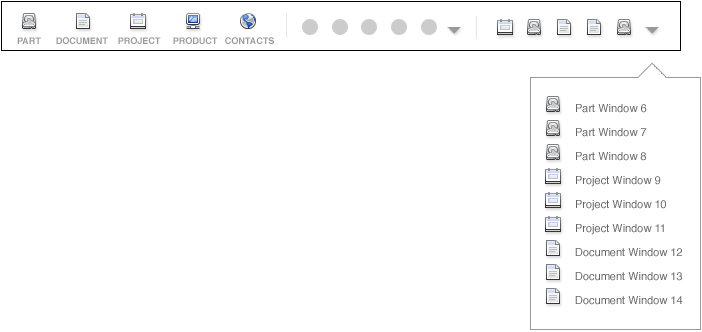
<style>
.page{position:relative;width:702px;height:332px;background:#ffffff}
.page>*{position:absolute;margin:0}
.t1{font:9px "Helvetica-Bold";color:#999999}
.t2{font:11px/24px "Helvetica";color:#666666}
</style>
<div class="page">
<p class="t1" style="left:17px;top:37px;width:257px;height:7px">PART      DOCUMENT    PROJECT     PRODUCT   CONTACTS</p>
<p class="t2" style="left:575px;top:104px;width:108px;height:201px">Part Window 6<br>Part Window 7<br>Part Window 8<br>Project Window 9<br>Project Window 10<br>Project Window 11<br>Document Window 12<br>Document Window 13<br>Document Window 14</p>
</div>
